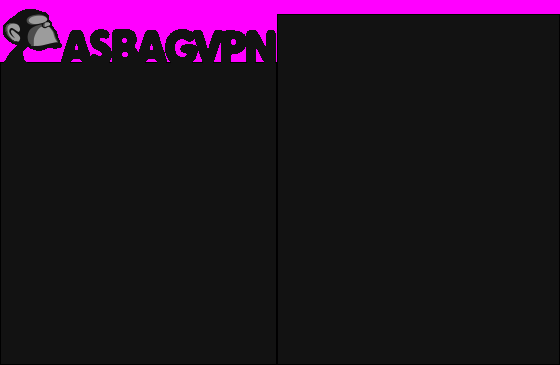
<style>
.page{position:relative;width:560px;height:365px;background:#121212}
.page>*{position:absolute;margin:0}
.t1{font:46.2px "ExposureCThree";color:#121212;scale:0.89 1}
</style>
<div class="page">
<p class="t1" style="left:61px;top:29px;width:215px;height:37px">ASBAGVPN</p>
</div>
